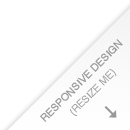
<style>
.page{position:relative;width:130px;height:130px;background:#ffffff}
.page>*{position:absolute;margin:0}
.t1{font:10px/15.8px "Helvetica";color:#999999;text-transform:uppercase;font-weight:bold}
.t2{font:10px/15.8px "Helvetica";color:#999999;text-transform:uppercase}
</style>
<div class="page">
<p class="t1" style="left:40px;top:39px;width:83px;height:83px;text-align:center;rotate:-45deg">responsive design<br><span class="t2">(resize me)</span></p>
</div>
